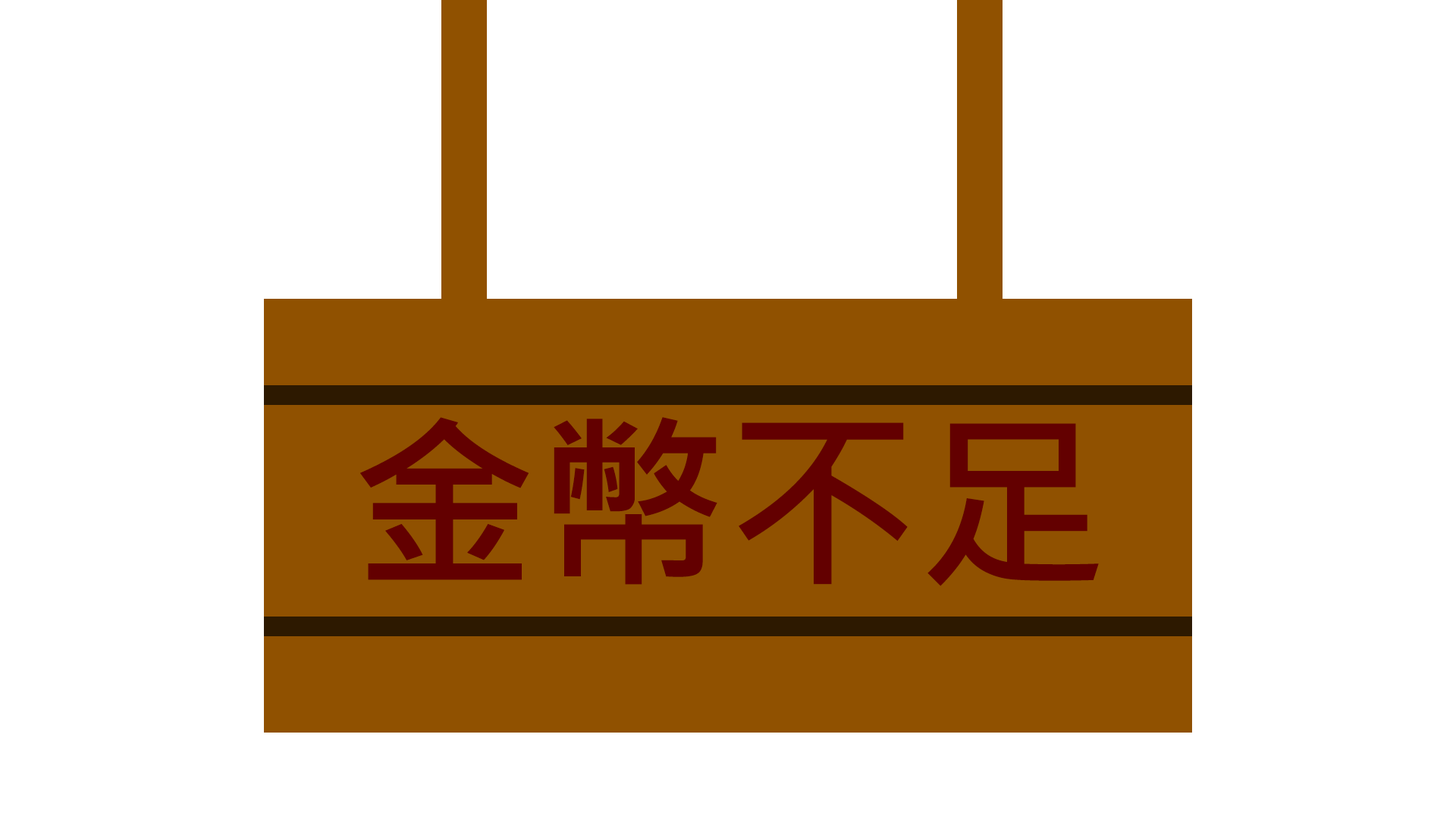
<style>
.page{position:relative;width:1456px;height:819px;background:#ffffff}
.page>*{position:absolute;margin:0}
.t1{font:189.6px "MicrosoftJhengHeiBold";color:#630000}
</style>
<div class="page">
<p class="t1" style="left:360px;top:417px;width:739px;height:169px">金幣不足</p>
</div>
